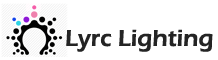
<style>
.page{position:relative;width:218px;height:60px;background:#ffffff}
.page>*{position:absolute;margin:0}
.t1{font:24px "ErasITC-Demi";color:#242424}
</style>
<div class="page">
<p class="t1" style="left:66px;top:29px;width:147px;height:23px">Lyrc Lighting</p>
</div>
